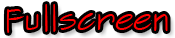
<style>
.page{position:relative;width:175px;height:38px;background:#ffffff}
.page>*{position:absolute;margin:0}
.t1{font:33.3px "SketchFlowPrint";color:#ff0000}
</style>
<div class="page">
<p class="t1" style="left:6px;top:4px;width:162px;height:29px">Fullscreen</p>
</div>
